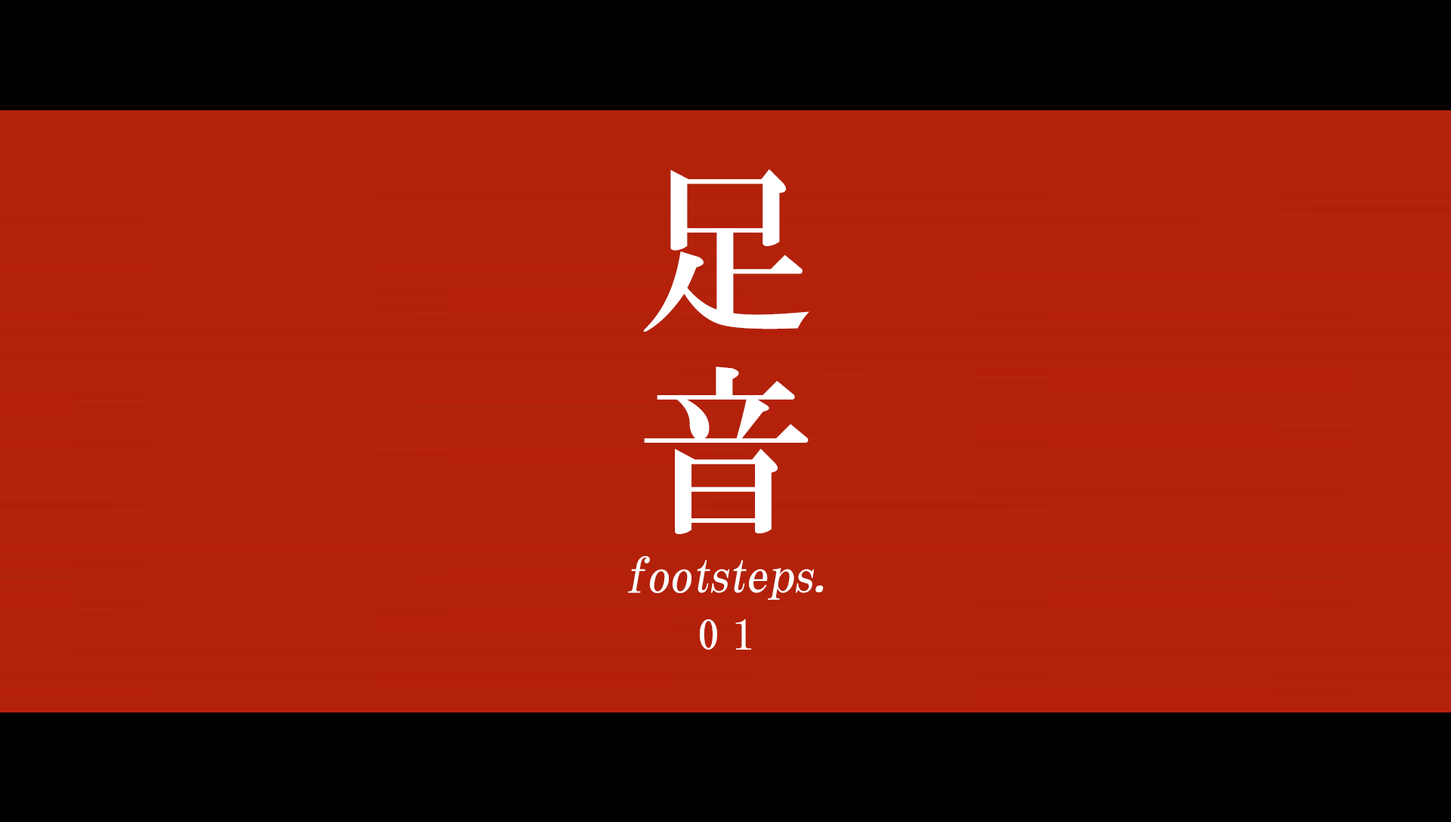
<style>
.page{position:relative;width:1451px;height:822px;background:#000000}
.page>*{position:absolute;margin:0}
.t1{font:181.3px/201px "HGMinchoB";letter-spacing:0.65em;color:#ffffff}
.t2{font:48.4px "HGPMinchoB";letter-spacing:0.01em;color:#ffffff;font-style:italic}
.t3{font:40.8px "HGMinchoB";letter-spacing:0.35em;color:#ffffff}
</style>
<div class="page">
<p class="t1" style="left:643px;top:169px;width:166px;height:365px">足<br>音</p>
<p class="t2" style="left:627px;top:556px;width:197px;height:44px">footsteps.</p>
<p class="t3" style="left:700px;top:619px;width:51px;height:31px">01</p>
</div>
